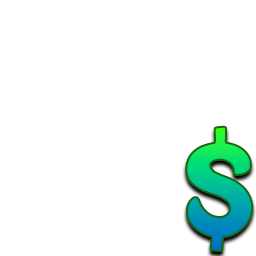
<style>
.page{position:relative;width:256px;height:256px;background:#ffffff}
.page>*{position:absolute;margin:0}
.t1{font:160px "Hey-Comic";text-transform:uppercase}
</style>
<div class="page">
<p class="t1" style="left:185px;top:125px;width:69px;height:127px">$</p>
</div>
